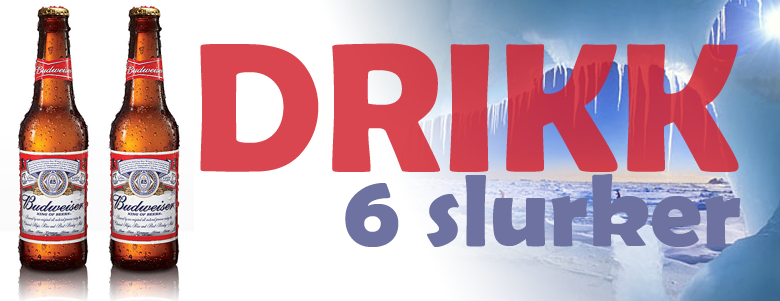
<style>
.page{position:relative;width:780px;height:301px;background:#ffffff}
.page>*{position:absolute;margin:0}
.t1{font:185.1px "BerlinSansFBDemi-Bold";color:#d2414d}
.t2{font:102.8px "BerlinSansFBDemi-Bold";color:#6d72a1}
</style>
<div class="page">
<p class="t1" style="left:200px;top:43px;width:539px;height:129px">DRIKK</p>
<p class="t2" style="left:345px;top:174px;width:396px;height:74px">6 slurker</p>
</div>
